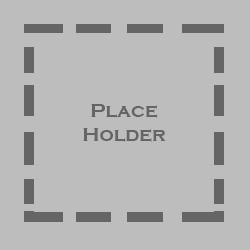
<style>
.page{position:relative;width:250px;height:250px;background:#bdbdbd}
.page>*{position:absolute;margin:0}
.t1{font:20px "CopperplateGothic-Bold";color:#656565}
</style>
<div class="page">
<p class="t1" style="left:83px;top:104px;width:83px;height:38px;text-align:center">Place<br>Holder</p>
</div>
